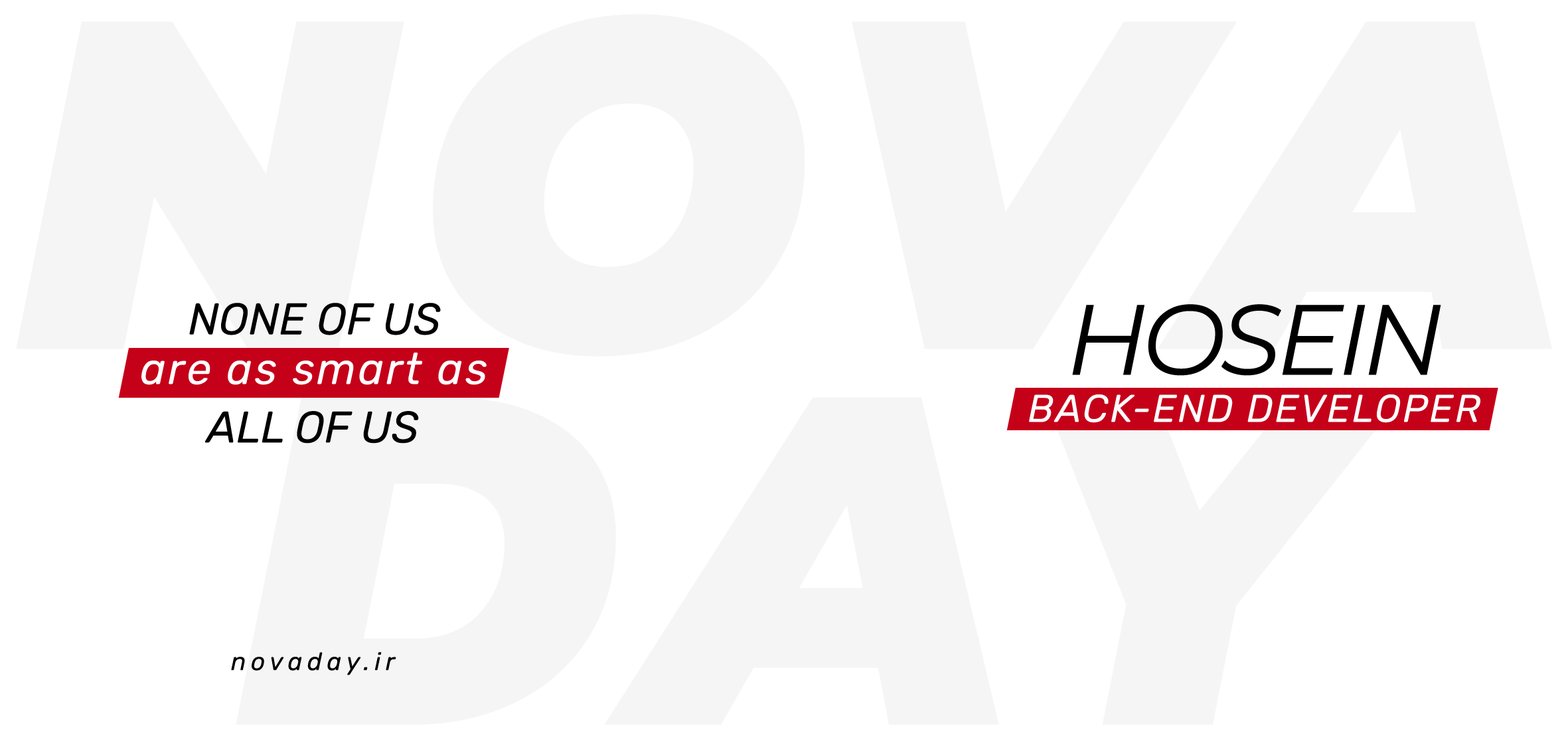
<style>
.page{position:relative;width:1568px;height:745px;background:#ffffff}
.page>*{position:absolute;margin:0}
.t1{font:44.3px "Rubik-Italic";color:#000000}
.t2{font:99.6px "Montserrat-Italic";letter-spacing:-0.05em;color:#000000}
.t3{font:44.3px "Rubik-Italic";letter-spacing:0.05em;color:#ffffff}
.t4{font:38.7px "Rubik-Italic";letter-spacing:0.05em;color:#ffffff}
.t5{font:24.9px "Rubik-Italic";letter-spacing:0.2em;color:#000000}
</style>
<div class="page">
<p class="t1" style="left:189px;top:303px;width:252px;height:32px">NONE OF US</p>
<p class="t2" style="left:1072px;top:304px;width:369px;height:72px">HOSEIN</p>
<p class="t3" style="left:141px;top:353px;width:346px;height:32px">are as smart as</p>
<p class="t4" style="left:1029px;top:394px;width:451px;height:29px">BACK-END DEVELOPER</p>
<p class="t1" style="left:205px;top:411px;width:214px;height:32px">ALL OF US</p>
<p class="t5" style="left:231px;top:652px;width:165px;height:23px">novaday.ir</p>
</div>
